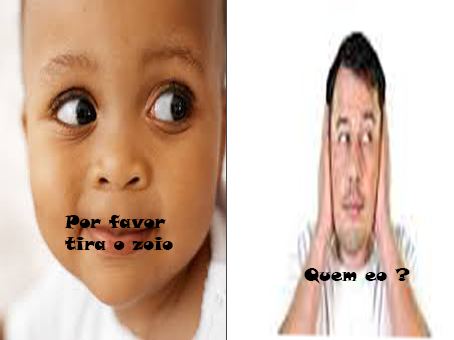
<style>
.page{position:relative;width:454px;height:340px;background:#ffffff}
.page>*{position:absolute;margin:0}
.t1{font:18px "SnapITC-Regular";color:#000000}
</style>
<div class="page">
<p class="t1" style="left:64px;top:215px;width:109px;height:35px">Por favor tira o zoio</p>
<p class="t1" style="left:304px;top:268px;width:106px;height:16px">Quem eo ?</p>
</div>
